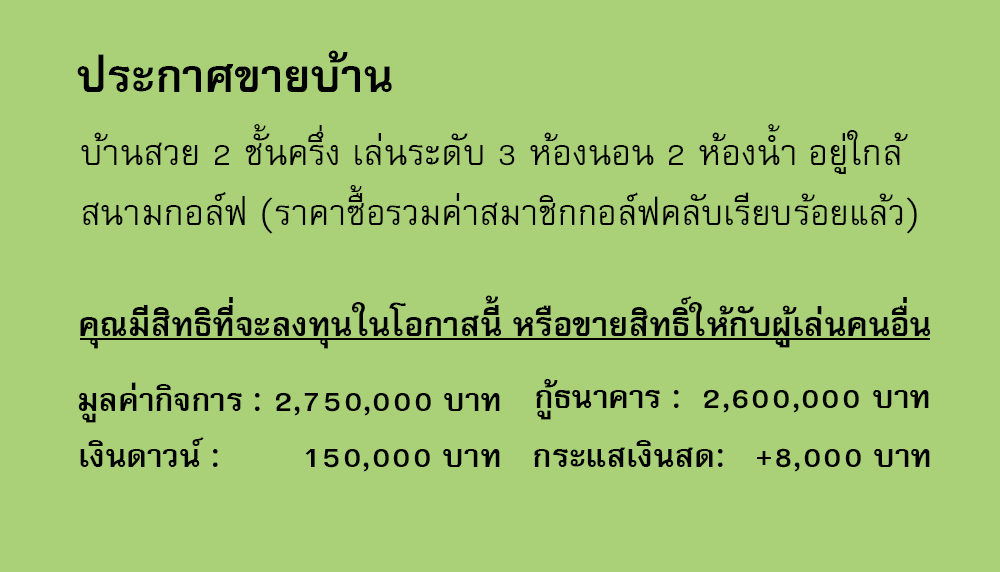
<style>
.page{position:relative;width:1000px;height:572px;background:#aad178}
.page>*{position:absolute;margin:0}
.t1{font:64px "FreesiaUPCBold";color:#000000}
.t2{font:50px/60px "FreesiaUPC";color:#000000}
.t3{font:49px/60px "FreesiaUPC";color:#000000}
.t4{font:47px "FreesiaUPCBold";color:#000000}
.t5{font:45px "FreesiaUPCBold";color:#000000}
</style>
<div class="page">
<p class="t1" style="left:77px;top:50px;width:315px;height:42px">ประกาศขายบ้าน</p>
<p class="t2" style="left:81px;top:124px;width:836px;height:110px">บ้านสวย 2 ชั้นครึ่ง เล่นระดับ 3 ห้องนอน 2 ห้องน้ำ อยู่ใกล้<br>สนามกอล์ฟ <span class="t3">(ราคาซื้อรวมค่าสมาชิกกอล์ฟคลับเรียบร้อยแล้ว)</span></p>
<p class="t4" style="left:80px;top:295px;width:851px;height:54px">คุณมีสิทธิที่จะลงทุนในโอกาสนี้ หรือขายสิทธิ์ให้กับผู้เล่นคนอื่น</p>
<p class="t5" style="left:78px;top:382px;width:422px;height:41px">มูลค่ากิจการ : 2,750,000 บาท</p>
<p class="t5" style="left:536px;top:379px;width:393px;height:41px">กู้ธนาคาร :  2,600,000 บาท</p>
<p class="t5" style="left:80px;top:436px;width:420px;height:36px">เงินดาวน์ :        150,000 บาท</p>
<p class="t5" style="left:534px;top:440px;width:396px;height:32px">กระแสเงินสด:   +8,000 บาท</p>
</div>
